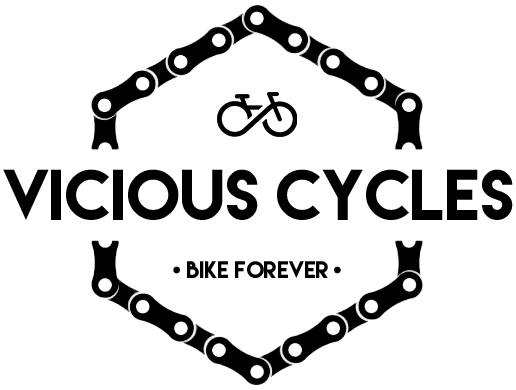
<style>
.page{position:relative;width:516px;height:390px;background:#ffffff}
.page>*{position:absolute;margin:0}
.t1{font:64px "LemonMilk";color:#000000}
.t2{font:21.3px "LemonMilk";color:#000000}
</style>
<div class="page">
<p class="t1" style="left:3px;top:169px;width:510px;height:51px">VICIOUS CYCLES</p>
<p class="t2" style="left:187px;top:261px;width:141px;height:17px">BIKE FOREVER</p>
</div>
